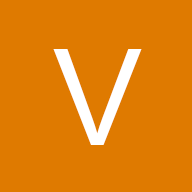
<style>
.page{position:relative;width:192px;height:192px;background:#df7a00}
.page>*{position:absolute;margin:0}
.t1{font:133.6px "ArialMT";letter-spacing:0.3em;color:#ffffff;text-transform:uppercase}
</style>
<div class="page">
<p class="t1" style="left:53px;top:49px;width:89px;height:96px">V</p>
</div>
